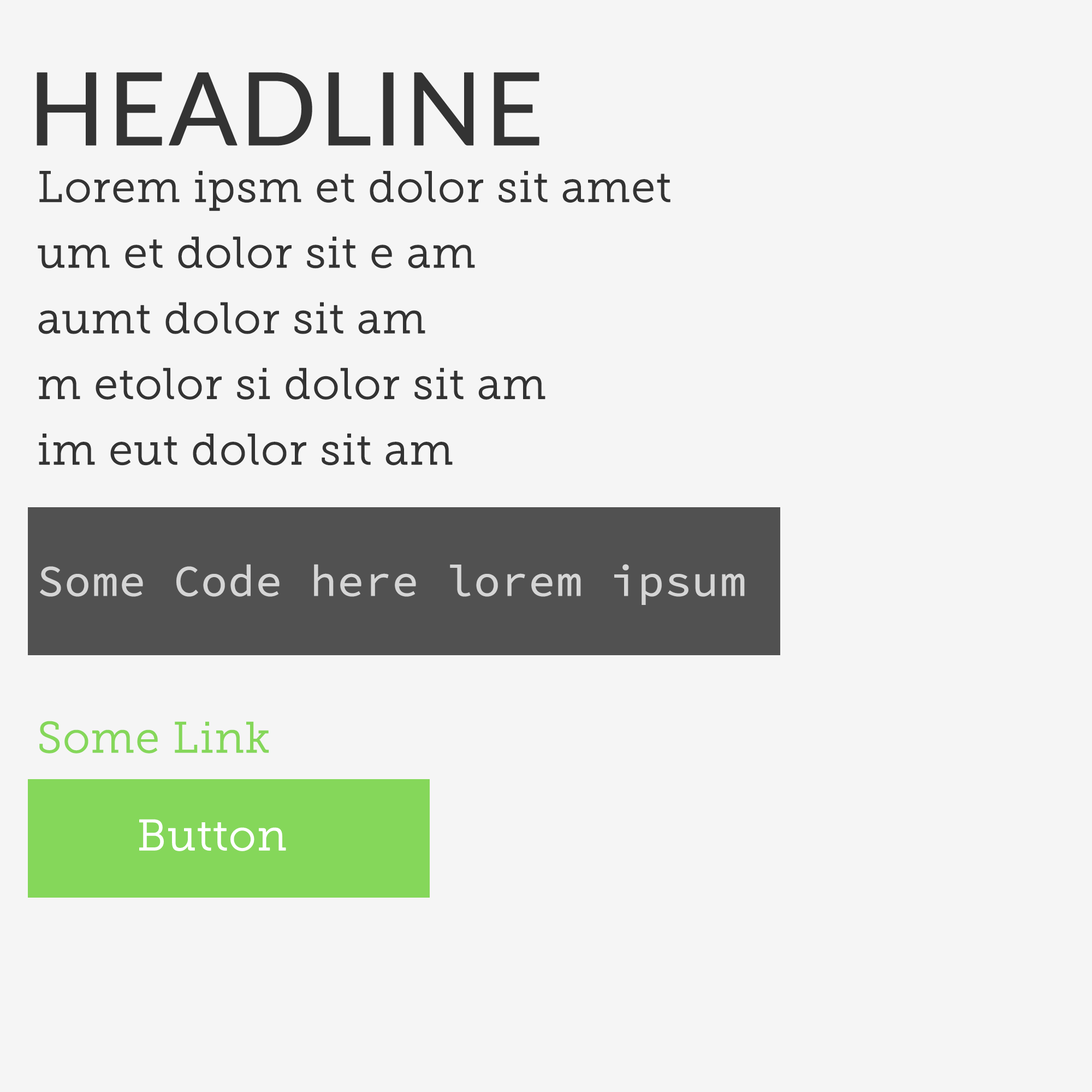
<style>
.page{position:relative;width:1092px;height:1092px;background:#f5f5f5}
.page>*{position:absolute;margin:0}
.t1{font:101px "Lato-Regular";color:#333333;text-transform:uppercase;font-weight:bold}
.t2{font:43.7px/65.7px "MuseoSlab-300";color:#333333;font-weight:bold}
.t3{font:43.7px/65.7px "MuseoSlab-300";color:#333333;text-transform:uppercase;font-weight:bold}
.t4{font:43.7px/65.7px "SourceCodePro-Regular";color:#d5d5d5;font-weight:bold}
.t5{font:43.7px "MuseoSlab-300";color:#85d75a;font-weight:bold}
.t6{font:43.7px "MuseoSlab-300";color:#ffffff;font-weight:bold}
</style>
<div class="page">
<p class="t1" style="left:37px;top:72px;width:502px;height:74px">Headline</p>
<p class="t2" style="left:38px;top:171px;width:707px;height:434px"><span class="t3">L</span>orem ipsm et dolor sit amet<br>um et dolor sit e am<br>aumt dolor sit am<br>m etolor si dolor sit am<br>im eut dolor sit am<br><br><span class="t4">Some Code here lorem ipsum</span></p>
<p class="t5" style="left:39px;top:721px;width:230px;height:32px">Some Link</p>
<p class="t6" style="left:139px;top:819px;width:147px;height:32px">Button</p>
</div>
